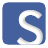
<style>
.page{position:relative;width:48px;height:48px;background:#45619d}
.page>*{position:absolute;margin:0}
.t1{font:53.4px "SourceSansPro-Regular";color:#ffffff;font-weight:bold}
</style>
<div class="page">
<p class="t1" style="left:17px;top:10px;width:26px;height:37px">S</p>
</div>
